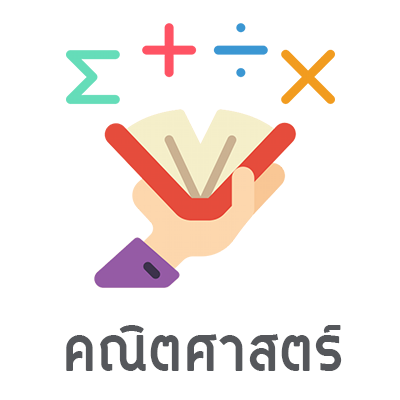
<style>
.page{position:relative;width:400px;height:400px;background:#ffffff}
.page>*{position:absolute;margin:0}
.t1{font:83.3px "Circular-Bold";color:#56585b}
</style>
<div class="page">
<p class="t1" style="left:66px;top:325px;width:276px;height:46px">คณิตศาสตร์</p>
</div>
